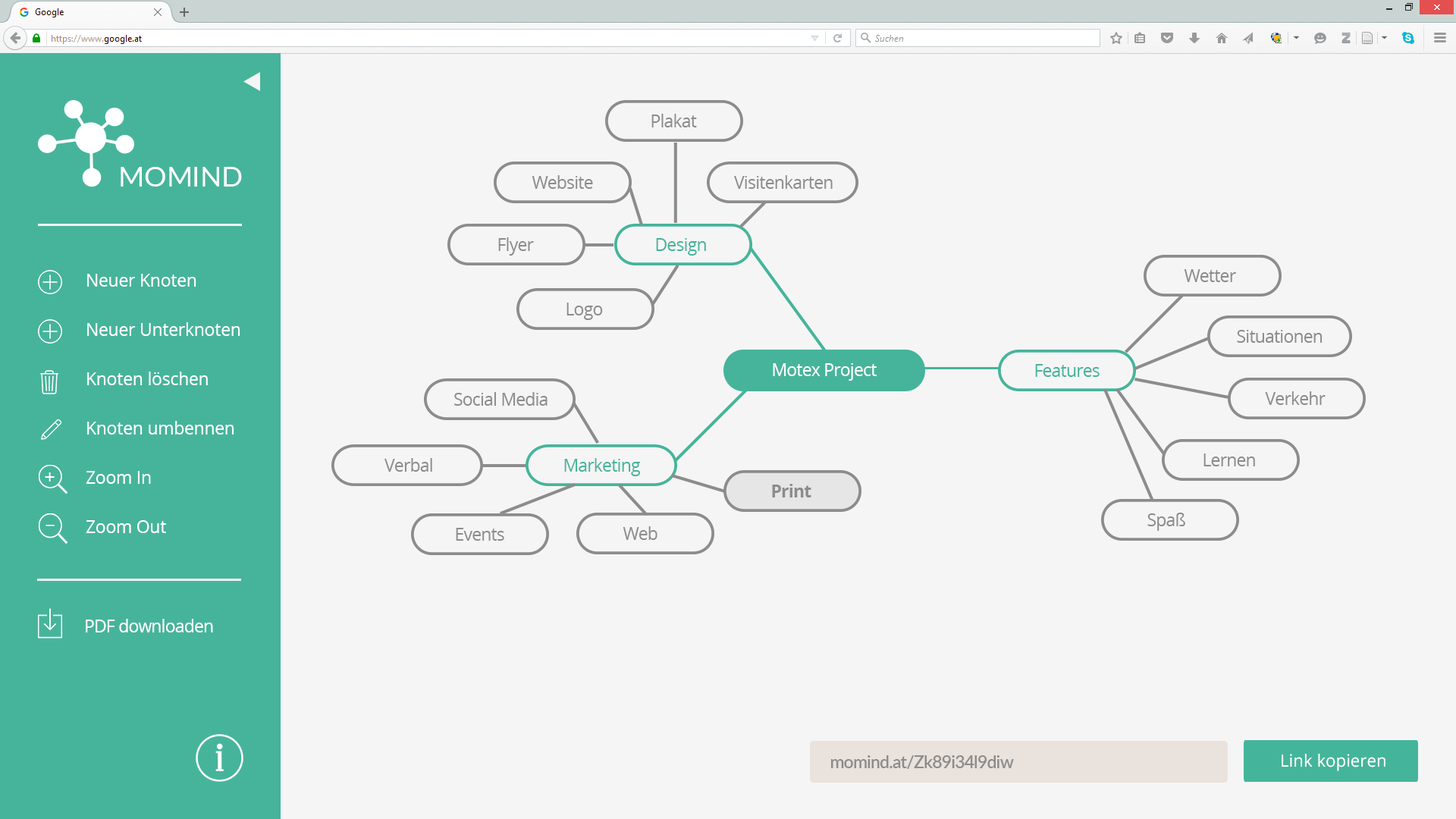
<style>
.page{position:relative;width:1456px;height:819px;background:#f5f5f5}
.page>*{position:absolute;margin:0}
.t1{font:17.1px "OpenSans";letter-spacing:-0.025em;color:#8c8c8c}
.t2{font:17.1px "OpenSans";letter-spacing:-0.025em;color:#46b49b}
.t3{font:17.1px/24.6px "OpenSans";color:#ffffff}
.t4{font:17.1px "OpenSans";letter-spacing:-0.025em;color:#ffffff}
.t5{font:19px "OpenSans";color:#ffffff}
.t6{font:17.1px "OpenSans-Bold";letter-spacing:-0.025em;color:#8c8c8c}
.t7{font:17.1px "Lato-Semibold";letter-spacing:-0.025em;color:#8c8c8c}
.t8{font:17.1px "OpenSans";color:#ffffff}
</style>
<div class="page">
<p class="t1" style="left:651px;top:114px;width:46px;height:13px">Plakat</p>
<p class="t1" style="left:532px;top:175px;width:61px;height:14px">Website</p>
<p class="t1" style="left:734px;top:175px;width:99px;height:14px">Visitenkarten</p>
<p class="t1" style="left:498px;top:237px;width:36px;height:19px">Flyer</p>
<p class="t2" style="left:656px;top:238px;width:50px;height:18px">Design</p>
<p class="t1" style="left:1184px;top:269px;width:52px;height:13px">Wetter</p>
<p class="t3" style="left:86px;top:274px;width:154px;height:259px">Neuer Knoten<br><br>Neuer Unterknoten<br><br>Knoten löschen<br><br>Knoten umbennen<br><br>Zoom In<br><br>Zoom Out</p>
<p class="t1" style="left:566px;top:303px;width:37px;height:17px">Logo</p>
<p class="t1" style="left:1237px;top:330px;width:86px;height:13px">Situationen</p>
<p class="t4" style="left:773px;top:363px;width:104px;height:18px">Motex Project</p>
<p class="t2" style="left:1035px;top:364px;width:65px;height:13px">Features</p>
<p class="t1" style="left:454px;top:392px;width:94px;height:14px">Social Media</p>
<p class="t1" style="left:1265px;top:391px;width:61px;height:14px">Verkehr</p>
<p class="t1" style="left:384px;top:458px;width:48px;height:14px">Verbal</p>
<p class="t2" style="left:564px;top:458px;width:77px;height:18px">Marketing</p>
<p class="t1" style="left:1203px;top:453px;width:52px;height:13px">Lernen</p>
<p class="t5" style="left:45px;top:472px;width:10px;height:10px">+</p>
<p class="t6" style="left:772px;top:484px;width:39px;height:13px">Print</p>
<p class="t1" style="left:1147px;top:513px;width:38px;height:18px">Spaß</p>
<p class="t5" style="left:45px;top:525px;width:10px;height:1px">_</p>
<p class="t1" style="left:456px;top:528px;width:48px;height:13px">Events</p>
<p class="t1" style="left:623px;top:526px;width:34px;height:14px">Web</p>
<p class="t4" style="left:86px;top:619px;width:127px;height:13px">PDF downloaden</p>
<p class="t7" style="left:831px;top:755px;width:183px;height:14px">momind.at/Zk89i34l9diw</p>
<p class="t8" style="left:1282px;top:753px;width:103px;height:18px">Link kopieren</p>
</div>
